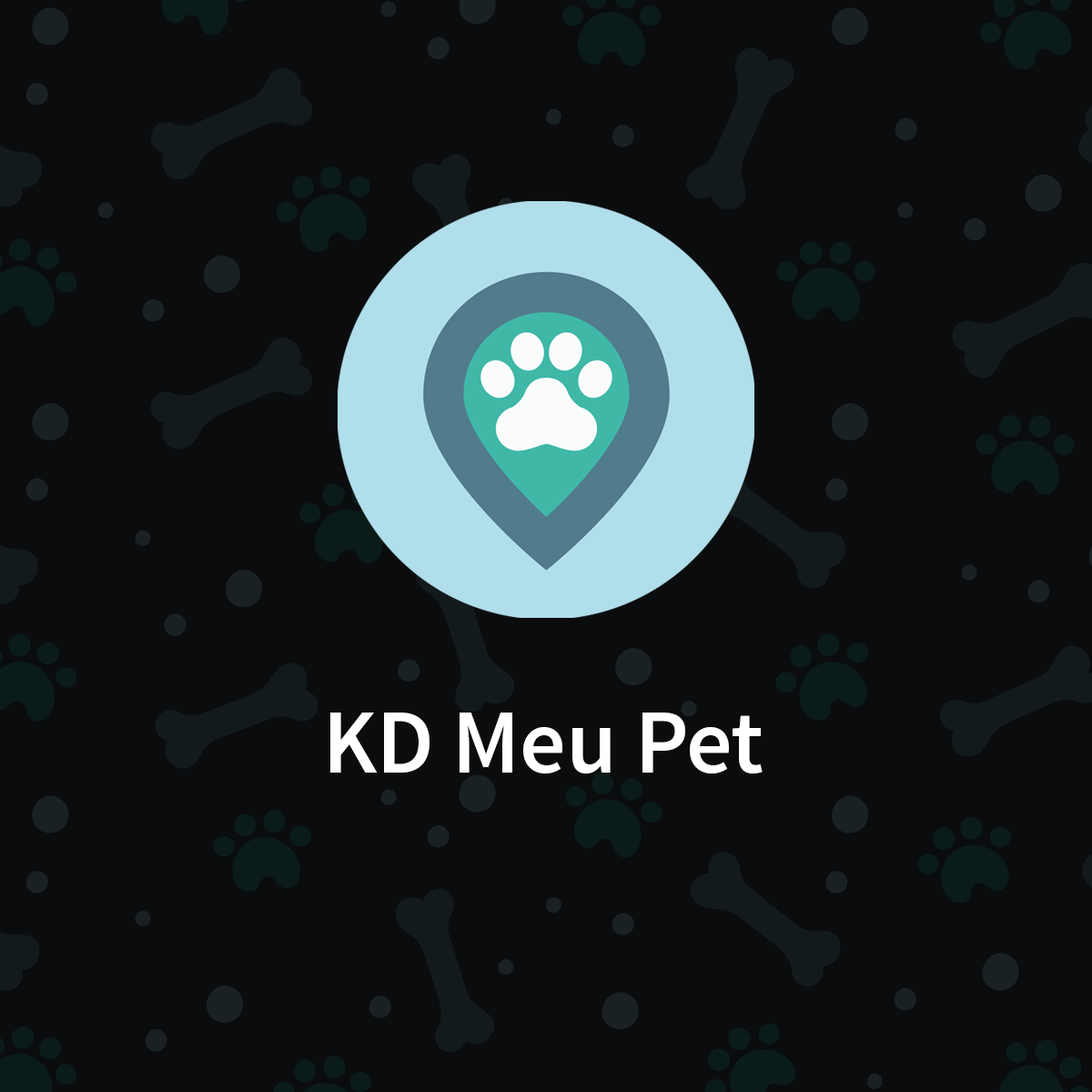
<style>
.page{position:relative;width:1092px;height:1092px;background:#0a0c0e}
.page>*{position:absolute;margin:0}
.t1{font:91px "SourceSansPro-Semibold";color:#ffffff}
</style>
<div class="page">
<p class="t1" style="left:330px;top:713px;width:433px;height:60px">KD Meu Pet</p>
</div>
